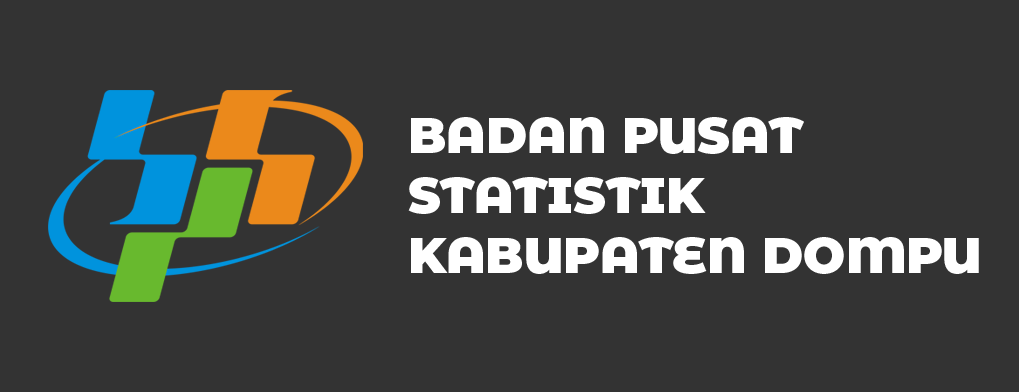
<style>
.page{position:relative;width:1019px;height:392px;background:#333333}
.page>*{position:absolute;margin:0}
.t1{font:50px "MontserratAlternates-Black";color:#ffffff}
</style>
<div class="page">
<p class="t1" style="left:408px;top:117px;width:571px;height:157px">BADAN PUSAT<br>STATISTIK<br>KABUPATEN DOMPU</p>
</div>
